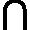
<style>
.page{position:relative;width:30px;height:30px;background:#ffffff}
.page>*{position:absolute;margin:0}
.t1{font:42px "ArialMT";color:#000000}
</style>
<div class="page">
<p class="t1" style="left:3px;top:0px;width:24px;height:30px;rotate:-180deg">U</p>
</div>
